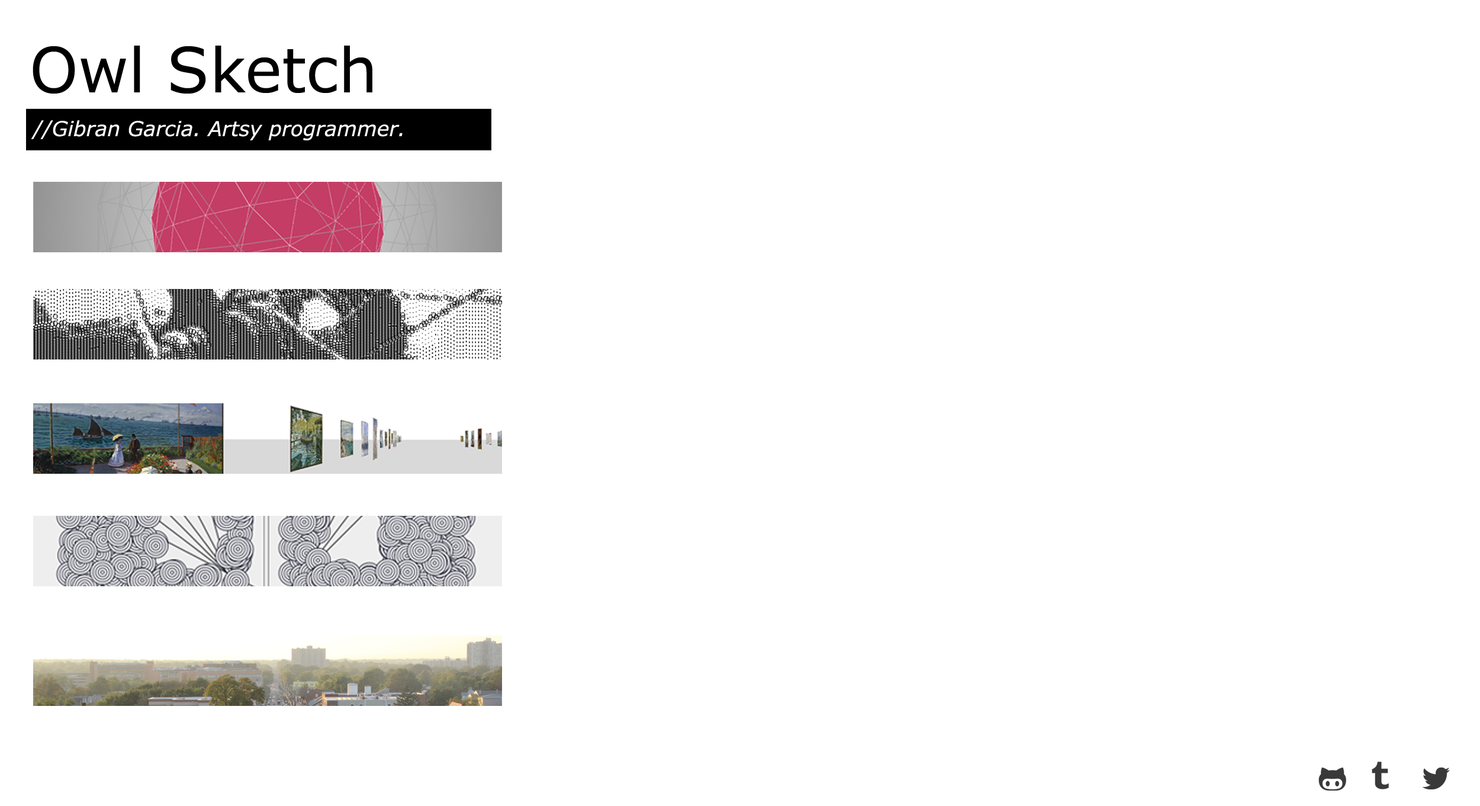
<style>
.page{position:relative;width:1480px;height:806px;background:#ffffff}
.page>*{position:absolute;margin:0}
.t1{font:61.7px "Verdana";color:#000000}
.t2{font:20.6px "Verdana-Italic";color:#ffffff}
</style>
<div class="page">
<p class="t1" style="left:33px;top:46px;width:339px;height:48px">Owl Sketch</p>
<p class="t2" style="left:31px;top:120px;width:372px;height:21px">//Gibran Garcia. Artsy programmer.</p>
</div>
